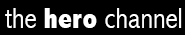
<style>
.page{position:relative;width:185px;height:35px;background:#000000}
.page>*{position:absolute;margin:0}
.t1{font:30px "AbadiMT-CondensedLight";color:#ffffff}
.t2{font:30px "AbadiMT-CondensedExtraBold";color:#ffffff}
</style>
<div class="page">
<p class="t1" style="left:5px;top:8px;width:177px;height:20px">the <span class="t2">hero </span>channel</p>
</div>
